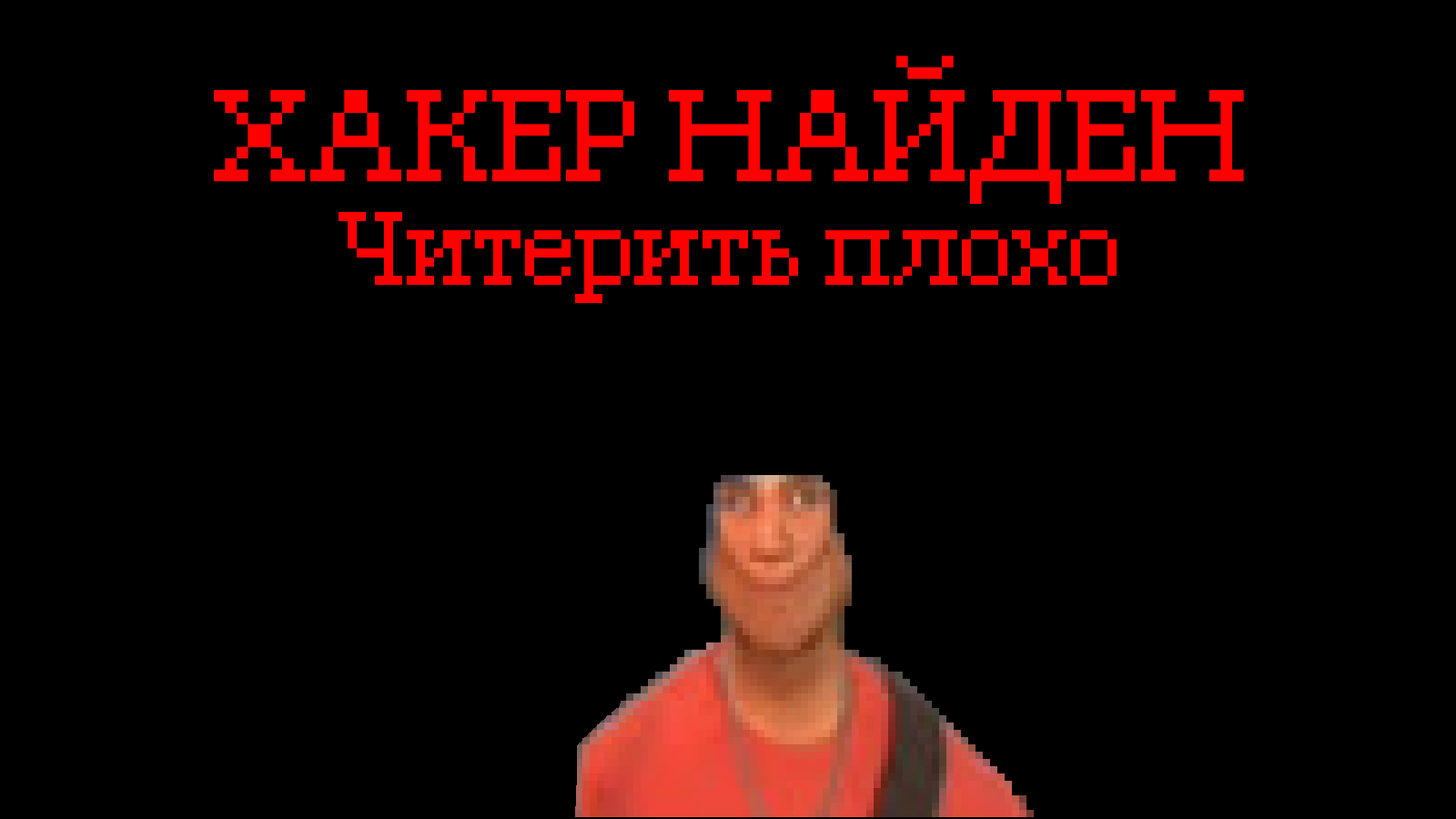
<style>
.page{position:relative;width:1456px;height:819px;background:#000000}
.page>*{position:absolute;margin:0}
.t1{font:113.7px "PixelGeorgia";letter-spacing:-0.05em;color:#ff0000}
.t2{font:91px "PixelGeorgia";letter-spacing:-0.05em;color:#ff0000}
</style>
<div class="page">
<p class="t1" style="left:214px;top:56px;width:1030px;height:148px">ХАКЕР НАЙДЕН</p>
<p class="t2" style="left:339px;top:212px;width:778px;height:91px">Читерить плохо</p>
</div>
